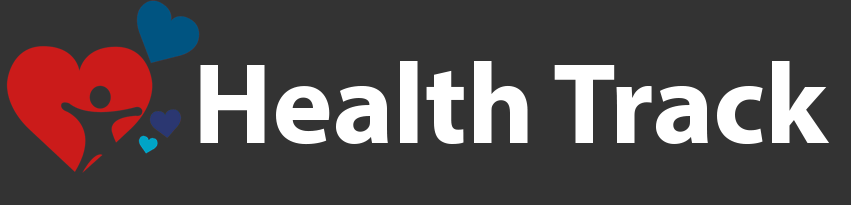
<style>
.page{position:relative;width:851px;height:205px;background:#333333}
.page>*{position:absolute;margin:0}
.t1{font:115px "MyriadPro-Bold";color:#ffffff}
</style>
<div class="page">
<p class="t1" style="left:200px;top:61px;width:630px;height:84px">Health Track</p>
</div>
